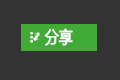
<style>
.page{position:relative;width:120px;height:80px;background:#333333}
.page>*{position:absolute;margin:0}
.t1{font:17.3px "MicrosoftYaHei";color:#ffffff;font-weight:bold;scale:0.78 1}
.t2{font:19.8px "MicrosoftYaHei";color:#ffffff;font-weight:bold;scale:0.82 1}
</style>
<div class="page">
<p class="t1" style="left:44px;top:28px;width:29px;height:18px">分享</p>
<p class="t2" style="left:30px;top:31px;width:4px;height:12px;rotate:90deg">···</p>
</div>
